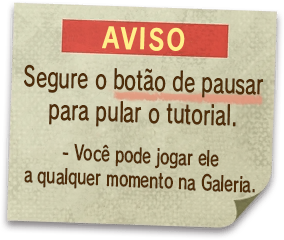
<style>
.page{position:relative;width:284px;height:240px}
.page>*{position:absolute;margin:0}
.t1{font:28px "RodinPro-B";letter-spacing:0.06em;color:#ffee8a;scale:0.85 1}
.t2{font:26.7px "RodinPro-DB";color:#4e2d0a;scale:0.69 1}
.t3{font:20.4px "RodinPro-DB";color:#4e2d0a;scale:0.71 1}
</style>
<div class="page">
<p class="t1" style="left:102px;top:26px;width:83px;height:25px;rotate:2deg">AVISO</p>
<p class="t2" style="left:24px;top:64px;width:240px;height:63px;text-align:center;rotate:2deg">Segure o botão de pausar<br>para pular o tutorial.</p>
<p class="t3" style="left:24px;top:143px;width:231px;height:50px;text-align:center;rotate:3deg">- Você pode jogar ele<br>a qualquer momento na Galeria.</p>
</div>
